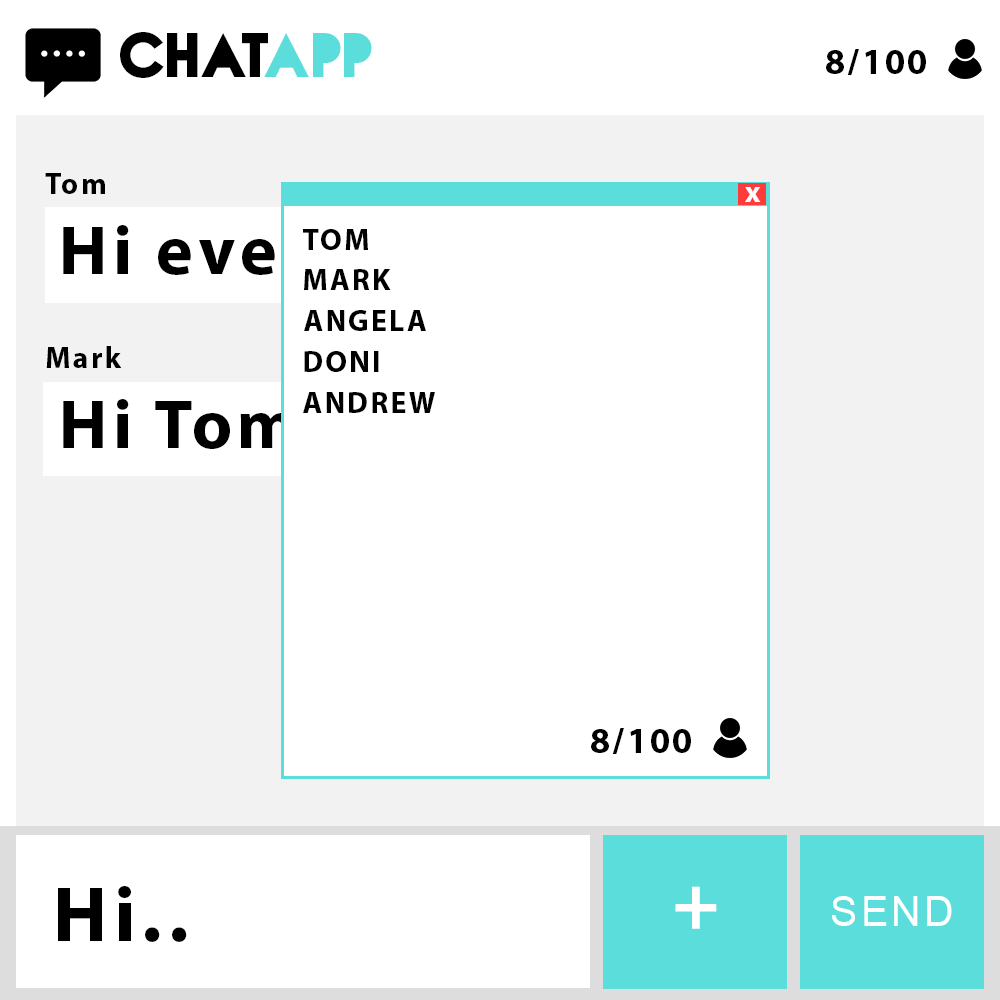
<style>
.page{position:relative;width:1000px;height:1000px;background:#ffffff}
.page>*{position:absolute;margin:0}
.t1{font:78px "NovaSOLID-SOLID";letter-spacing:0.075em;color:#000000}
.t2{font:78px "NovaSOLID-SOLID";letter-spacing:0.075em;color:#5bdddb}
.t3{font:36px "MyriadPro-Bold";letter-spacing:0.075em;color:#000000}
.t4{font:30px "MyriadPro-Bold";letter-spacing:0.075em;color:#000000}
.t5{font:30px "MyriadPro-Bold";letter-spacing:0.075em;color:#ffffff}
.t6{font:70px "MyriadPro-Bold";letter-spacing:0.075em}
.t7{font:70px "MyriadPro-Bold";letter-spacing:0.075em;color:#000000}
.t8{font:79px "MyriadPro-Bold";letter-spacing:0.075em;color:#000000}
.t9{font:79px "MyriadPro-Bold";letter-spacing:0.075em;color:#ffffff}
.t10{font:41px "ArialMT";letter-spacing:0.075em;color:#ffffff}
</style>
<div class="page">
<p class="t1" style="left:120px;top:32px;width:252px;height:46px">CHAT<span class="t2">APP</span></p>
<p class="t3" style="left:826px;top:49px;width:100px;height:26px">8/100</p>
<p class="t4" style="left:45px;top:173px;width:60px;height:21px">Tom</p>
<p class="t5" style="left:745px;top:187px;width:16px;height:15px">x</p>
<p class="t6" style="left:63px;top:225px;width:443px;height:65px">Hi everyone!</p>
<p class="t4" style="left:303px;top:229px;width:65px;height:21px">TOM</p>
<p class="t4" style="left:304px;top:269px;width:87px;height:21px">MARK</p>
<p class="t4" style="left:304px;top:310px;width:122px;height:21px">ANGELA</p>
<p class="t4" style="left:46px;top:346px;width:76px;height:22px">Mark</p>
<p class="t4" style="left:304px;top:351px;width:75px;height:21px">DONI</p>
<p class="t7" style="left:63px;top:399px;width:301px;height:57px">Hi Tom :)</p>
<p class="t4" style="left:303px;top:392px;width:132px;height:21px">ANDREW</p>
<p class="t3" style="left:591px;top:728px;width:100px;height:26px">8/100</p>
<p class="t8" style="left:58px;top:886px;width:129px;height:56px">Hi..</p>
<p class="t9" style="left:675px;top:886px;width:42px;height:43px">+</p>
<p class="t10" style="left:831px;top:896px;width:121px;height:30px">SEND</p>
</div>
